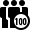
<style>
.page{position:relative;width:30px;height:30px;background:#000000}
.page>*{position:absolute;margin:0}
.t1{font:10px "MyriadPro-Regular";color:#010101;text-transform:uppercase;font-weight:bold;scale:0.7 1}
</style>
<div class="page">
<p class="t1" style="left:15px;top:18px;width:12px;height:8px">100</p>
</div>
